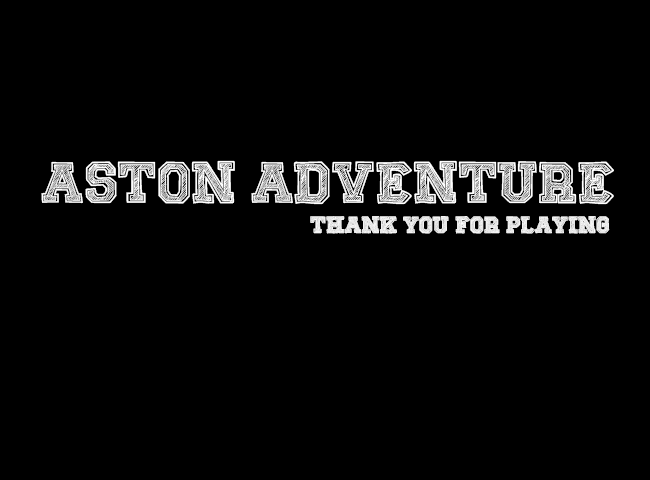
<style>
.page{position:relative;width:650px;height:480px;background:#000000}
.page>*{position:absolute;margin:0}
.t1{font:60px "SketchCollege";color:#ffffff}
.t2{font:24px "SketchCollege";color:#ffffff}
</style>
<div class="page">
<p class="t1" style="left:41px;top:160px;width:573px;height:45px">Aston Adventure</p>
<p class="t2" style="left:310px;top:216px;width:300px;height:18px">Thank You For Playing</p>
</div>
